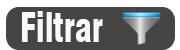
<style>
.page{position:relative;width:180px;height:50px;background:#454545}
.page>*{position:absolute;margin:0}
.t1{font:40.3px "Swiss721BT-BlackCondensed";color:#fcf8f8;scale:0.8 1}
</style>
<div class="page">
<p class="t1" style="left:22px;top:11px;width:81px;height:31px">Filtrar</p>
</div>
